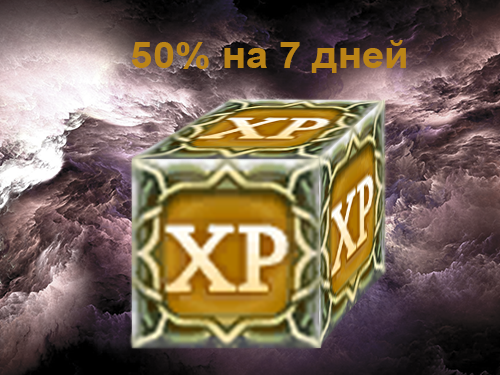
<style>
.page{position:relative;width:500px;height:375px}
.page>*{position:absolute;margin:0}
.t1{font:36px "Arial-BoldMT";color:#bb8416;scale:1.11 1}
</style>
<div class="page">
<p class="t1" style="left:131px;top:40px;width:275px;height:33px">50% на 7 дней</p>
</div>
